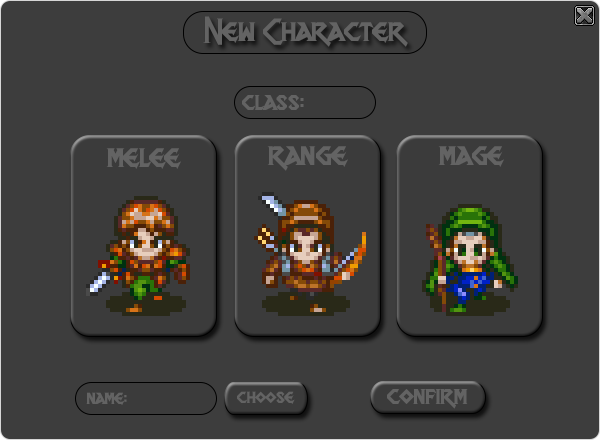
<style>
.page{position:relative;width:600px;height:440px;background:#3d3d3d}
.page>*{position:absolute;margin:0}
.t1{font:30px "DragonSlapper";color:#636363}
.t2{font:24px "DragonSlapper";color:#636363}
.t3{font:18px "DragonSlapper";color:#636363}
</style>
<div class="page">
<p class="t1" style="left:203px;top:16px;width:205px;height:31px">New Character</p>
<p class="t2" style="left:242px;top:95px;width:62px;height:15px">class:</p>
<p class="t1" style="left:106px;top:148px;width:75px;height:21px">melee</p>
<p class="t1" style="left:267px;top:146px;width:81px;height:25px">range</p>
<p class="t1" style="left:438px;top:146px;width:66px;height:21px">mage</p>
<p class="t2" style="left:387px;top:389px;width:81px;height:20px">confirm</p>
<p class="t3" style="left:86px;top:392px;width:41px;height:13px">name:</p>
<p class="t3" style="left:237px;top:391px;width:58px;height:13px">choose</p>
</div>
